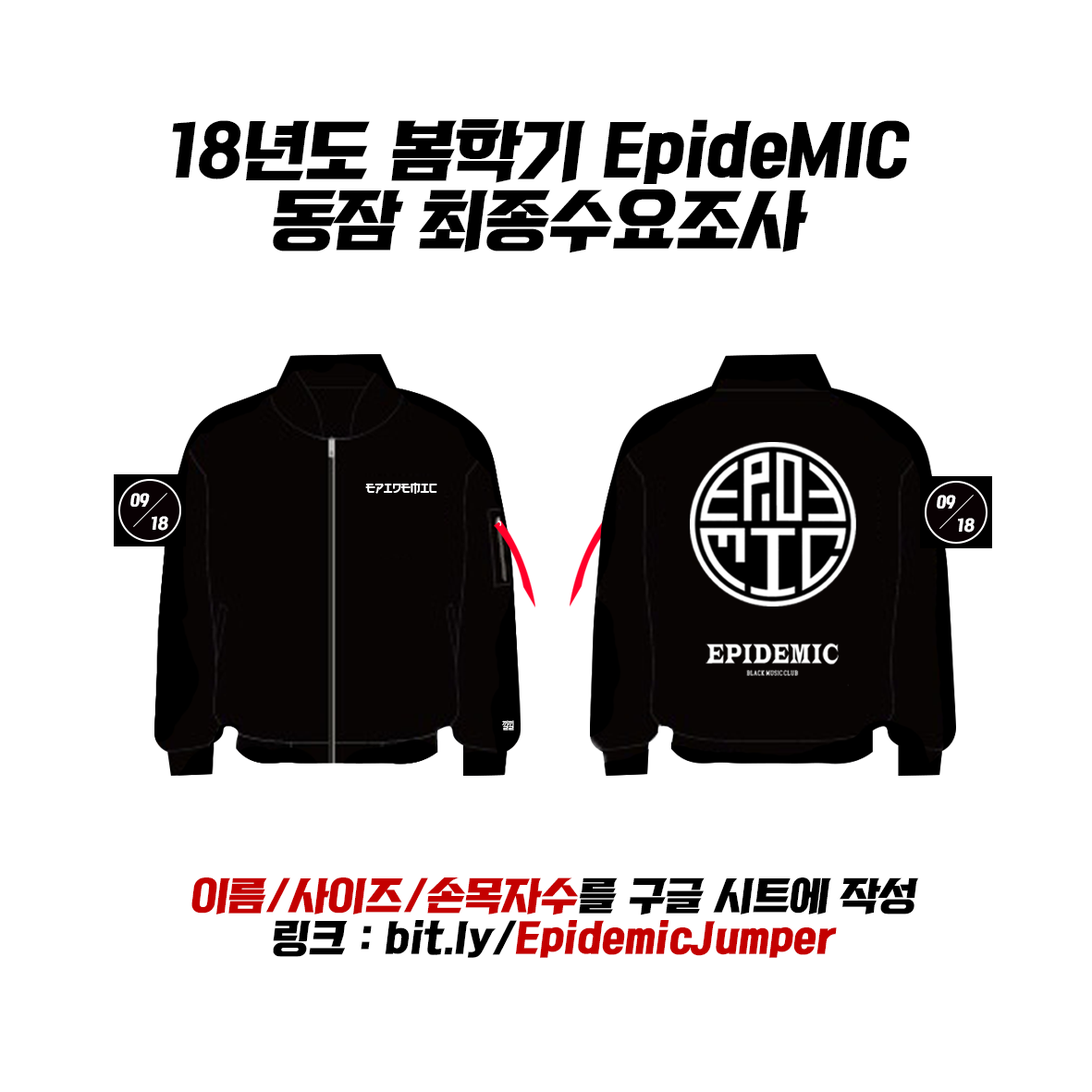
<style>
.page{position:relative;width:1092px;height:1092px;background:#ffffff}
.page>*{position:absolute;margin:0}
.t1{font:65.5px/69.3px "KoreanRKT-R";color:#000000}
.t2{font:13.8px "Electroharmonix-Regular";color:#ffffff}
.t3{font:15.4px "KoreanRKT-R";color:#ffffff}
.t4{font:10.3px "KoreanGD12-R";color:#ffffff;scale:0.69 1}
.t5{font:38.5px/42.4px "KoreanRKT-R";color:#000000}
.t6{font:38.5px/42.4px "KoreanRKT-R";color:#c40000}
</style>
<div class="page">
<p class="t1" style="left:172px;top:119px;width:738px;height:134px;text-align:center">18년도 봄학기 EpideMIC<br>동잠 최종수요조사</p>
<p class="t2" style="left:365px;top:483px;width:72px;height:11px">epidemic</p>
<p class="t3" style="left:130px;top:493px;width:20px;height:14px">09</p>
<p class="t3" style="left:937px;top:495px;width:19px;height:14px">09</p>
<p class="t3" style="left:152px;top:516px;width:16px;height:15px">18</p>
<p class="t3" style="left:958px;top:518px;width:17px;height:15px">18</p>
<p class="t4" style="left:502px;top:720px;width:12px;height:10px">낄낄</p>
<p class="t5" style="left:191px;top:877px;width:728px;height:81px;text-align:center"><span class="t6">이름/사이즈/손목자수</span>를 구글 시트에 작성<br>링크 : bit.ly/<span class="t6">EpidemicJumper</span></p>
</div>
